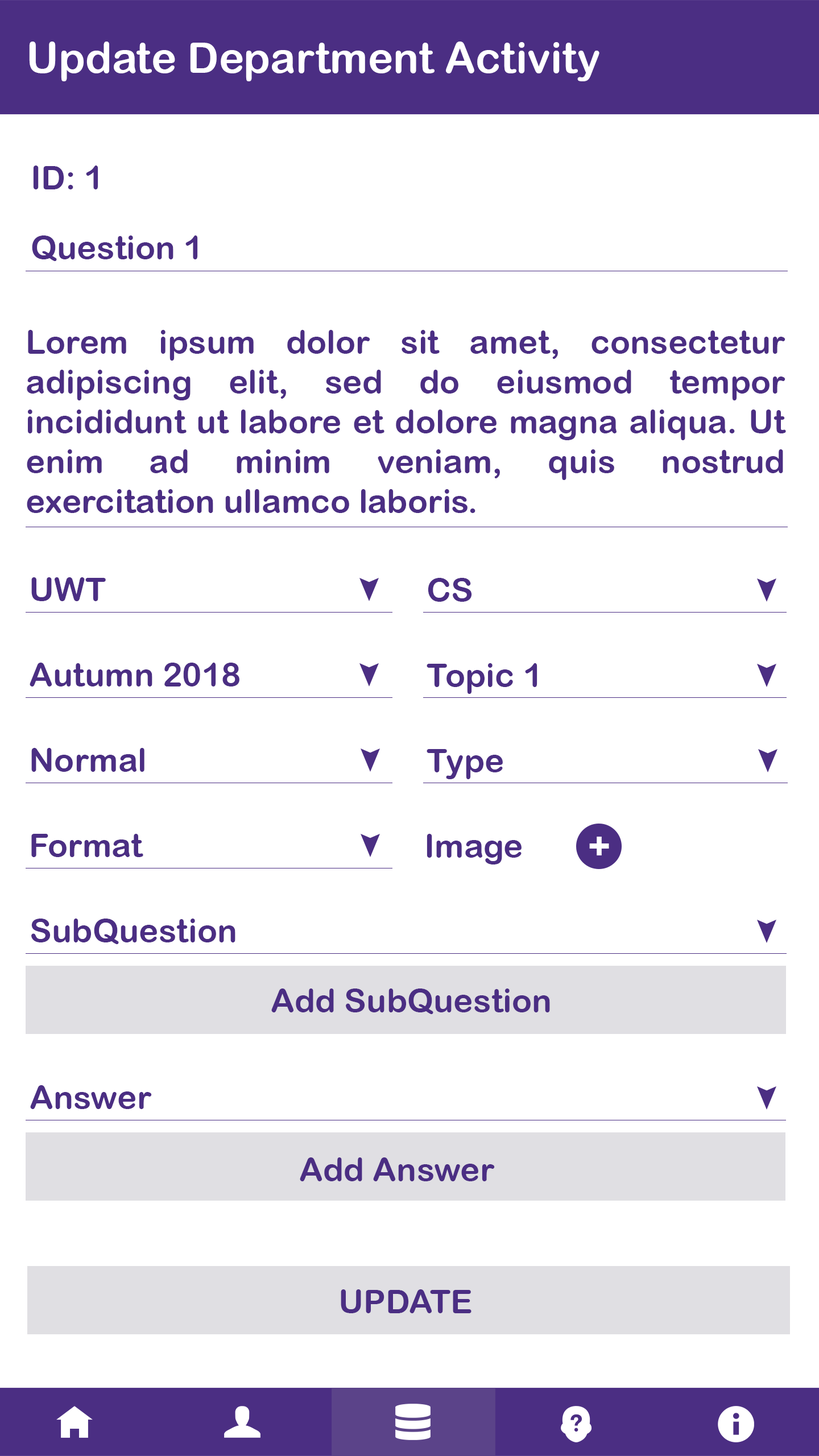
<style>
.page{position:relative;width:819px;height:1456px;background:#ffffff}
.page>*{position:absolute;margin:0}
.t1{font:42.7px "ArialRoundedMTBold";color:#ffffff}
.t2{font:33.2px "ArialRoundedMTBold";color:#4b2e83}
.t3{font:37.9px "ArialRoundedMTBold";color:#ffffff}
</style>
<div class="page">
<p class="t1" style="left:29px;top:42px;width:570px;height:39px">Update Department Activity</p>
<p class="t2" style="left:33px;top:166px;width:65px;height:23px">ID: 1</p>
<p class="t2" style="left:32px;top:235px;width:166px;height:26px">Question 1</p>
<p class="t2" style="left:27px;top:330px;width:759px;height:183px;text-align:justify">Lorem ipsum dolor sit amet, consectetur adipiscing elit, sed do eiusmod tempor incididunt ut labore et dolore magna aliqua. Ut enim ad minim veniam, quis nostrud exercitation ullamco laboris.</p>
<p class="t2" style="left:31px;top:577px;width:75px;height:24px">UWT</p>
<p class="t2" style="left:428px;top:578px;width:44px;height:24px">CS</p>
<p class="t2" style="left:30px;top:663px;width:209px;height:23px">Autumn 2018</p>
<p class="t2" style="left:427px;top:663px;width:110px;height:31px">Topic 1</p>
<p class="t2" style="left:31px;top:748px;width:113px;height:24px">Normal</p>
<p class="t2" style="left:427px;top:749px;width:76px;height:30px">Type</p>
<p class="t2" style="left:31px;top:834px;width:112px;height:23px">Format</p>
<p class="t2" style="left:427px;top:834px;width:95px;height:30px">Image</p>
<p class="t3" style="left:589px;top:837px;width:20px;height:18px">+</p>
<p class="t2" style="left:31px;top:919px;width:204px;height:25px">SubQuestion</p>
<p class="t2" style="left:271px;top:988px;width:279px;height:26px">Add SubQuestion</p>
<p class="t2" style="left:30px;top:1085px;width:122px;height:24px">Answer</p>
<p class="t2" style="left:300px;top:1157px;width:195px;height:24px">Add Answer</p>
<p class="t2" style="left:341px;top:1289px;width:130px;height:24px">UPDATE</p>
</div>
